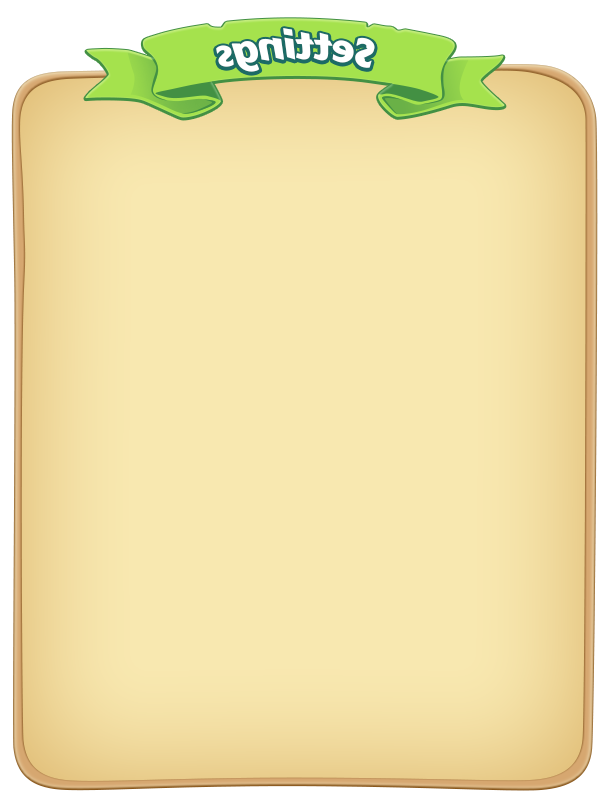
<style>
.page{position:relative;width:607px;height:804px;background:#f8e8b0}
.page>*{position:absolute;margin:0}
.t1{font:38px "CarterOne";letter-spacing:-0.02em;color:#ffffff}
</style>
<div class="page">
<p class="t1" style="left:216px;top:28px;width:159px;height:44px;rotate:-180deg">Settings</p>
</div>
